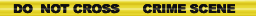
<style>
.page{position:relative;width:256px;height:16px}
.page>*{position:absolute;margin:0}
.t1{font:12px "Arial-Black";letter-spacing:-0.06em;color:#0f0e0e;scale:1.11 1}
.t2{font:12px "Arial-Black";letter-spacing:-0.07em;color:#0f0e0e;scale:1.11 1}
</style>
<div class="page">
<p class="t1" style="left:13px;top:4px;width:107px;height:9px">DO  NOT CROSS</p>
<p class="t2" style="left:143px;top:4px;width:93px;height:9px">CRIME SCENE</p>
</div>
